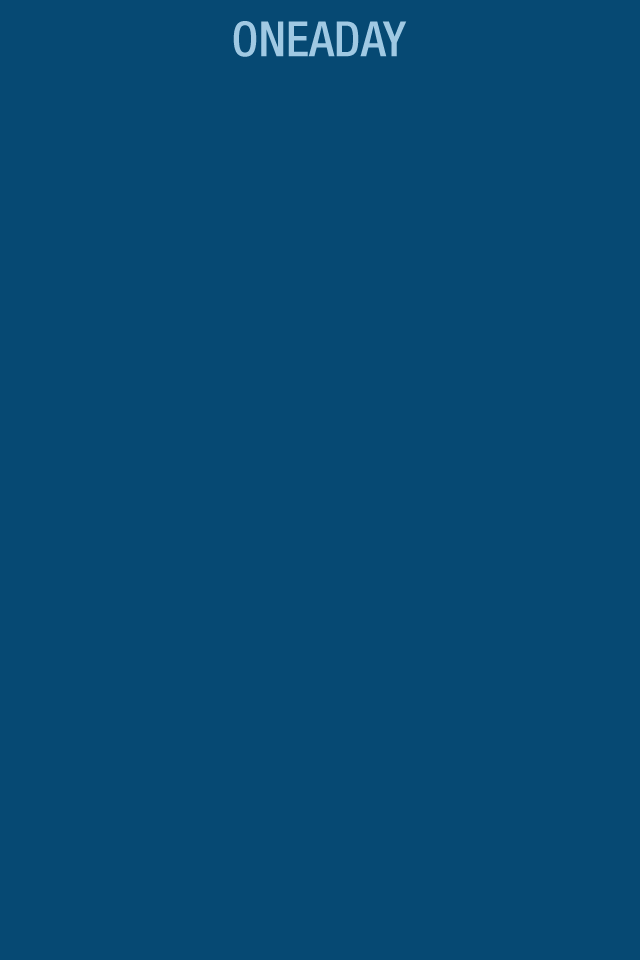
<style>
.page{position:relative;width:640px;height:960px;background:#064973}
.page>*{position:absolute;margin:0}
.t1{font:48px "HelveticaNeue-MediumCond";color:#a0c9e3}
</style>
<div class="page">
<p class="t1" style="left:233px;top:21px;width:174px;height:36px">ONEADAY</p>
</div>
